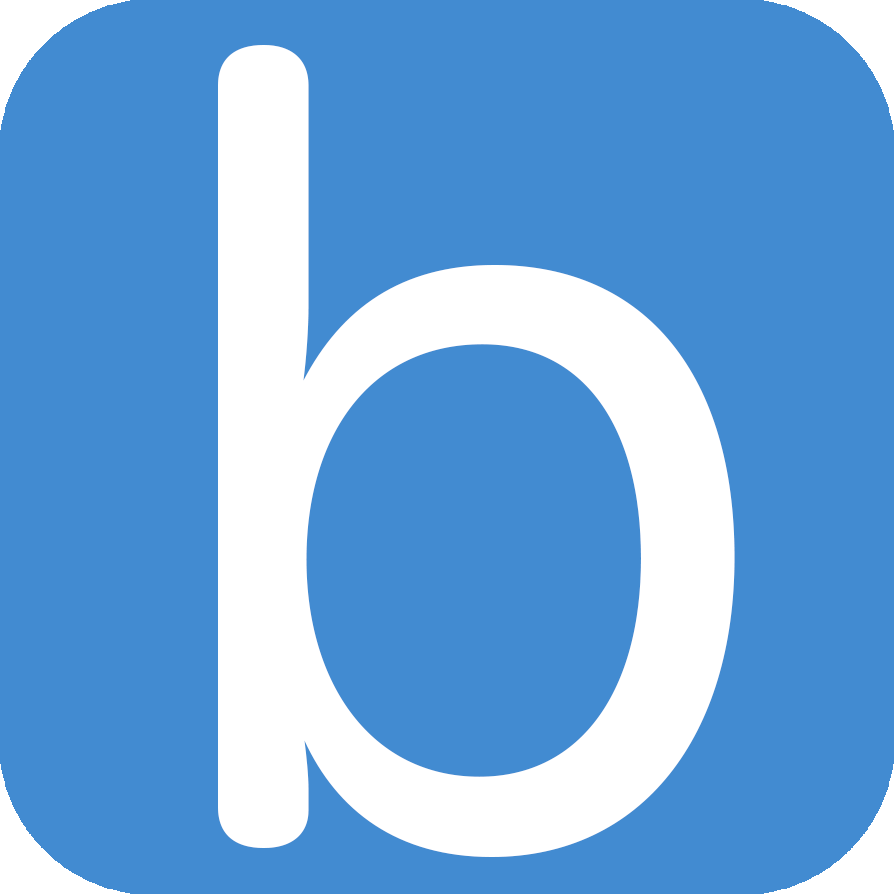
<style>
.page{position:relative;width:894px;height:894px;background:#428bd1}
.page>*{position:absolute;margin:0}
.t1{font:1016px "HiraMaruProN-W4";color:#ffffff}
</style>
<div class="page">
<p class="t1" style="left:218px;top:45px;width:517px;height:812px">b</p>
</div>
